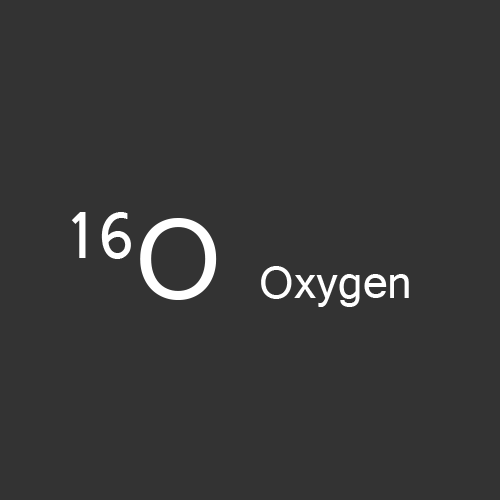
<style>
.page{position:relative;width:500px;height:500px;background:#333333}
.page>*{position:absolute;margin:0}
.t1{font:48px "Gautami";color:#ffffff}
.t2{font:120px "Gautami";color:#ffffff}
</style>
<div class="page">
<p class="t1" style="left:71px;top:212px;width:338px;height:95px"><span class="t2">16O </span>Oxygen</p>
</div>
